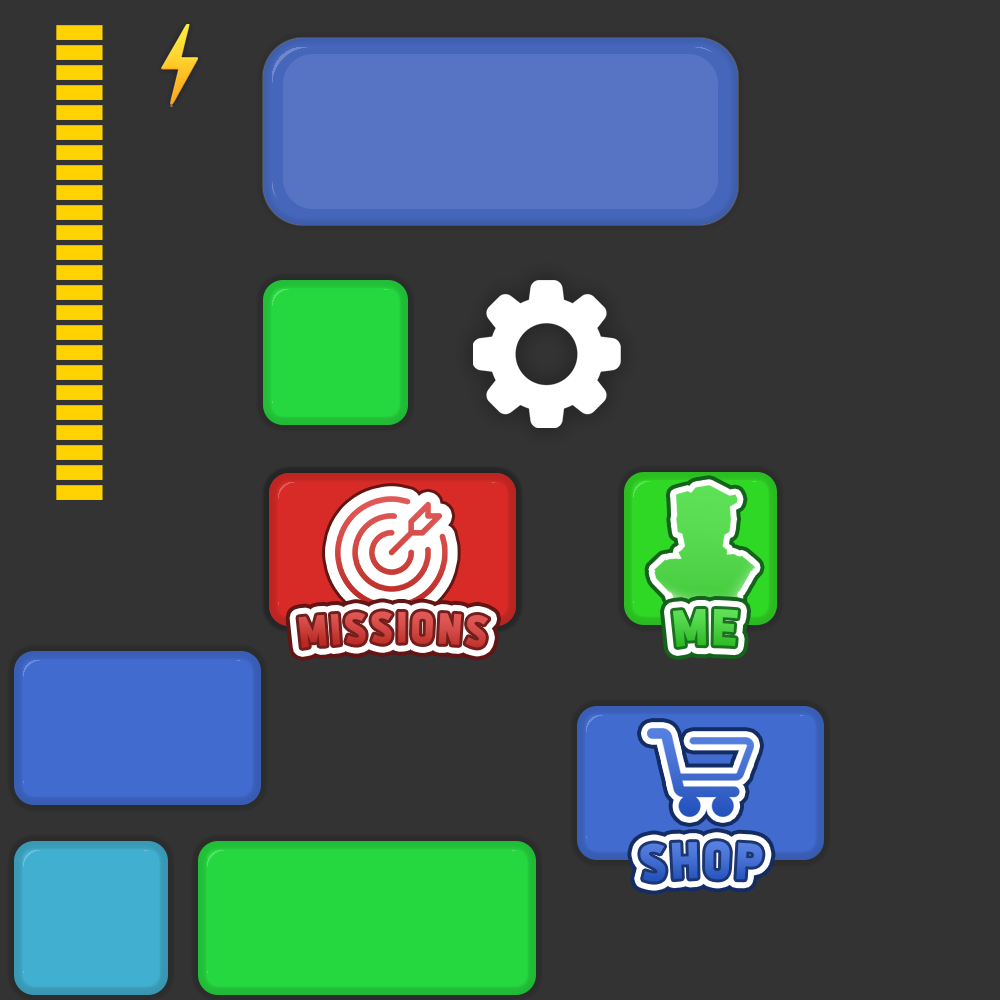
<style>
.page{position:relative;width:1000px;height:1000px;background:#333333}
.page>*{position:absolute;margin:0}
.t1{font:43.8px "AlltheWaytotheSun";letter-spacing:0.1em;color:#d04743}
.t2{font:51.6px "AlltheWaytotheSun";letter-spacing:0.1em;color:#4bd043}
.t3{font:51.6px "AlltheWaytotheSun";letter-spacing:0.1em;color:#446fd2}
</style>
<div class="page">
<p class="t1" style="left:298px;top:611px;width:191px;height:37px">Missions</p>
<p class="t2" style="left:673px;top:609px;width:66px;height:38px">ME</p>
<p class="t3" style="left:640px;top:841px;width:123px;height:41px">Shop</p>
</div>
